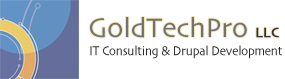
<style>
.page{position:relative;width:285px;height:79px;background:#ffffff}
.page>*{position:absolute;margin:0}
.t1{font:28px "Skia-Regular";color:#737171}
.t2{font:14px "Skia-Regular";color:#323030;font-weight:bold}
.t3{font:13.6px "Skia-Regular";letter-spacing:-0.01em;color:#2c2b2b;scale:0.88 1}
</style>
<div class="page">
<p class="t1" style="left:90px;top:17px;width:189px;height:21px">GoldTechPro <span class="t2">LLC</span></p>
<p class="t3" style="left:90px;top:45px;width:192px;height:14px">IT Consulting &amp; Drupal Development</p>
</div>
